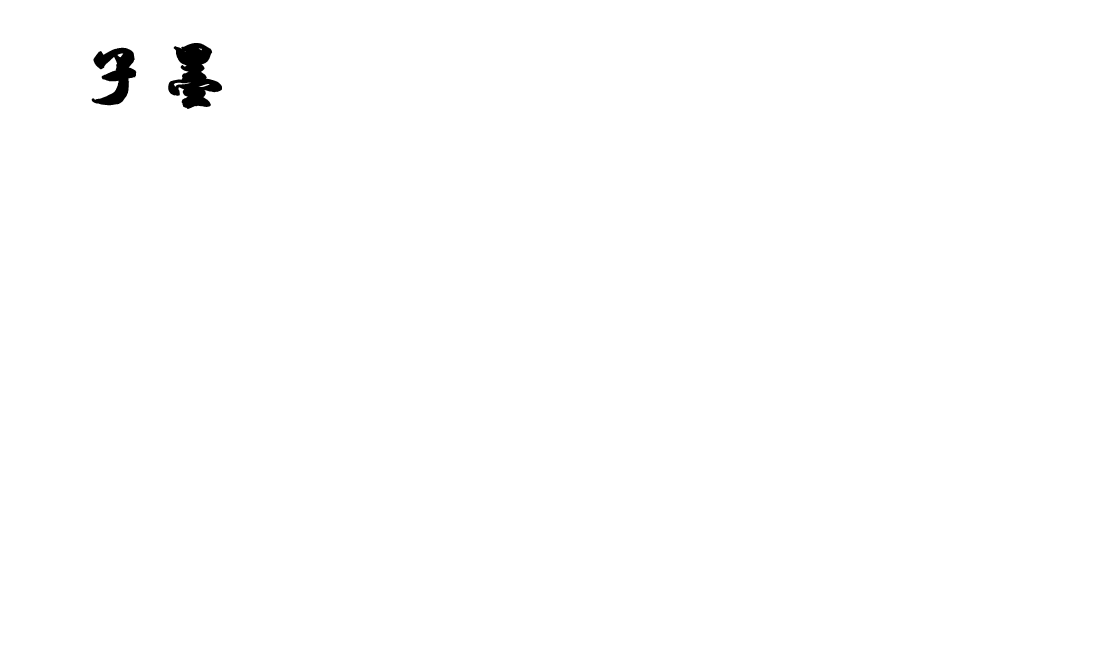
<style>
.page{position:relative;width:1111px;height:666px;background:#ffffff}
.page>*{position:absolute;margin:0}
.t1{font:72px "HYi4gf";letter-spacing:0.03em;color:#000000;font-weight:bold}
</style>
<div class="page">
<p class="t1" style="left:91px;top:43px;width:131px;height:66px">子墨</p>
</div>
